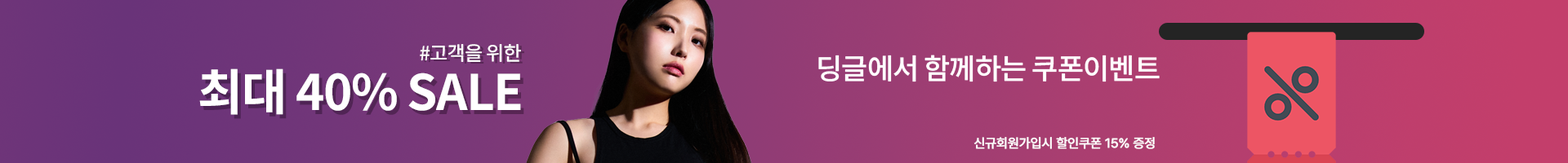
<style>
.page{position:relative;width:1568px;height:163px}
.page>*{position:absolute;margin:0}
.t1{font:19.6px "NotoSansKR-Regular";letter-spacing:-0.025em;color:#ffffff;font-weight:bold}
.t2{font:28.6px "NotoSansKR-Medium";letter-spacing:-0.025em;color:#ffffff;font-weight:bold}
.t3{font:49px "NotoSansKR-Bold";letter-spacing:-0.025em;color:#ffffff;font-weight:bold}
.t4{font:13.1px "Pretendard-Regular";letter-spacing:-0.025em;color:#ffffff;font-weight:bold}
</style>
<div class="page">
<p class="t1" style="left:420px;top:44px;width:101px;height:18px">#고객을 위한</p>
<p class="t2" style="left:818px;top:55px;width:342px;height:27px">딩글에서 함께하는 쿠폰이벤트</p>
<p class="t3" style="left:199px;top:69px;width:322px;height:46px">최대 40% SALE</p>
<p class="t4" style="left:973px;top:137px;width:182px;height:12px">신규회원가입시 할인쿠폰 15% 증정</p>
</div>
